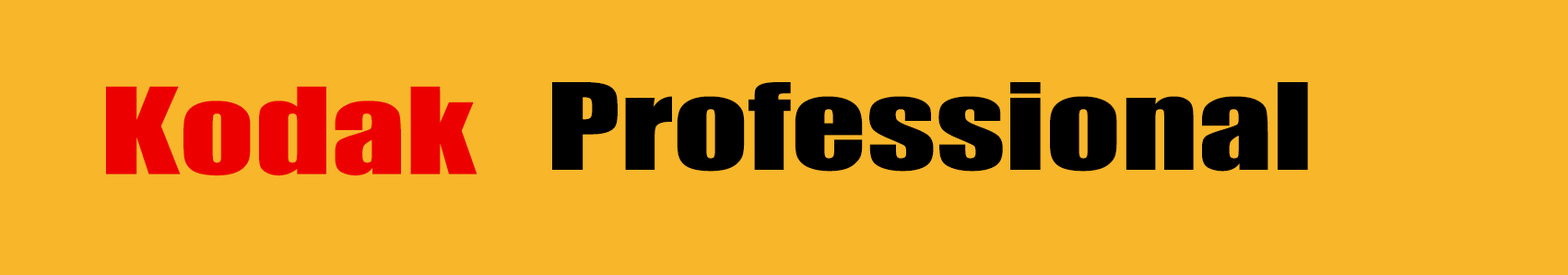
<style>
.page{position:relative;width:1568px;height:275px;background:#f8b62a}
.page>*{position:absolute;margin:0}
.t1{font:110.6px "Impact";color:#ed0000;scale:1.33 1}
.t2{font:110.6px "Impact";color:#000000;scale:1.33 1}
</style>
<div class="page">
<p class="t1" style="left:106px;top:86px;width:371px;height:90px">Kodak</p>
<p class="t2" style="left:552px;top:82px;width:756px;height:89px">Professional</p>
</div>
